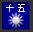
<style>
.page{position:relative;width:33px;height:32px;background:#000090}
.page>*{position:absolute;margin:0}
.t1{font:10.4px "SimSun";color:#ffffff}
</style>
<div class="page">
<p class="t1" style="left:6px;top:4px;width:19px;height:8px">十五</p>
</div>
